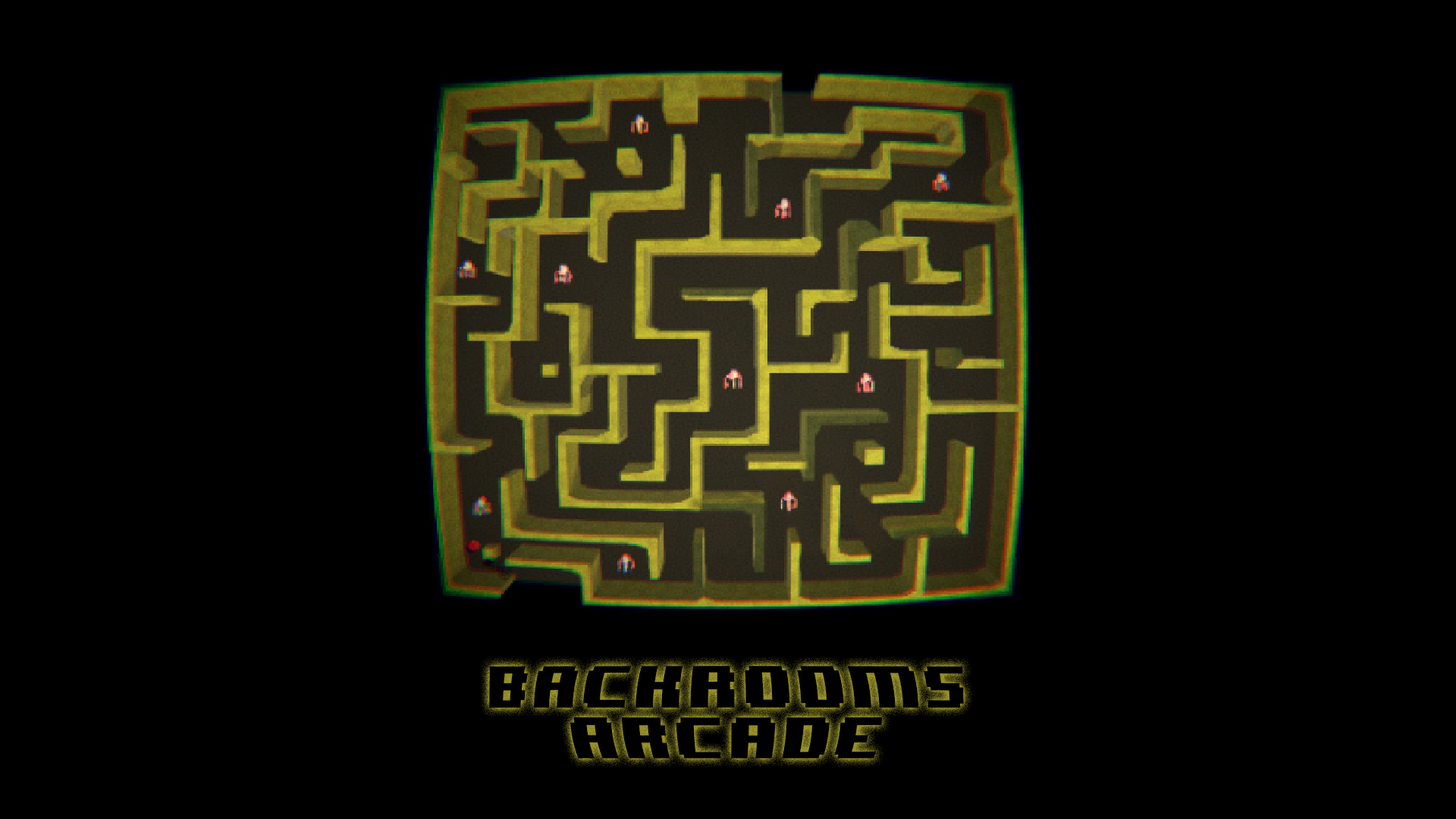
<style>
.page{position:relative;width:1456px;height:819px;background:#000000}
.page>*{position:absolute;margin:0}
.t1{font:48.5px/50.5px "8BITWONDERNominal";letter-spacing:0.05em;color:#000000}
</style>
<div class="page">
<p class="t1" style="left:489px;top:666px;width:475px;height:92px;text-align:center">BACKROOMS<br>ARCADE</p>
</div>
